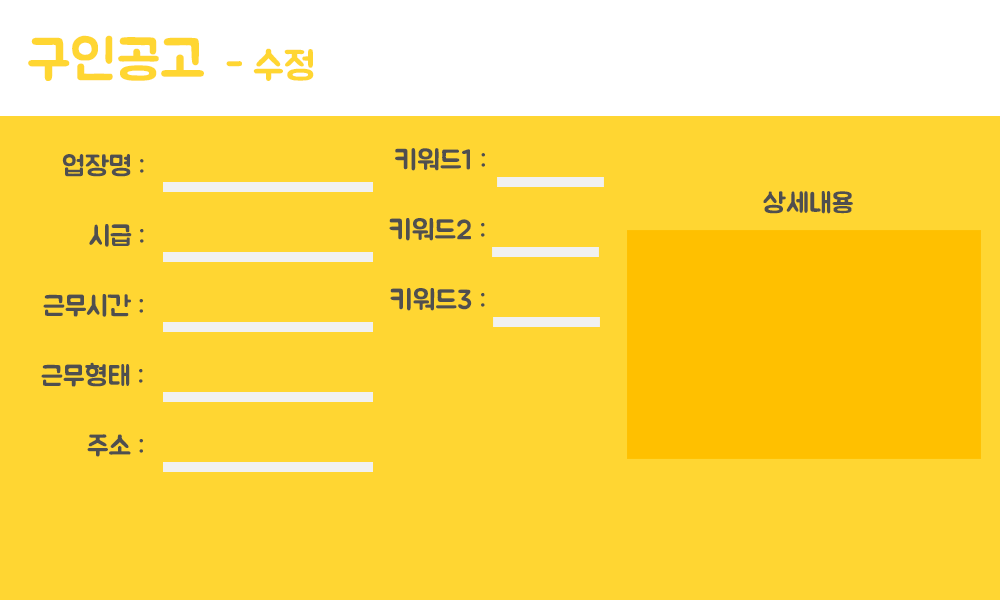
<style>
.page{position:relative;width:1000px;height:600px;background:#ffd632}
.page>*{position:absolute;margin:0}
.t1{font:55.6px "BMJUA";color:#ffd632}
.t2{font:38.9px "BMJUA";color:#ffd632}
.t3{font:27.6px "BMJUA";color:#4f4f4f}
.t4{font:27.8px "BMJUA";color:#4f4f4f}
</style>
<div class="page">
<p class="t1" style="left:28px;top:35px;width:176px;height:46px">구인공고</p>
<p class="t2" style="left:226px;top:48px;width:88px;height:33px">- 수정</p>
<p class="t3" style="left:395px;top:148px;width:90px;height:23px">키워드1 :</p>
<p class="t3" style="left:62px;top:154px;width:82px;height:23px">업장명 :</p>
<p class="t3" style="left:763px;top:191px;width:90px;height:23px">상세내용</p>
<p class="t4" style="left:389px;top:218px;width:96px;height:23px">키워드2 :</p>
<p class="t4" style="left:89px;top:224px;width:55px;height:23px">시급 :</p>
<p class="t4" style="left:43px;top:294px;width:100px;height:23px">근무시간 :</p>
<p class="t4" style="left:390px;top:288px;width:95px;height:23px">키워드3 :</p>
<p class="t4" style="left:41px;top:362px;width:102px;height:25px">근무형태 :</p>
<p class="t4" style="left:87px;top:434px;width:56px;height:23px">주소 :</p>
</div>
